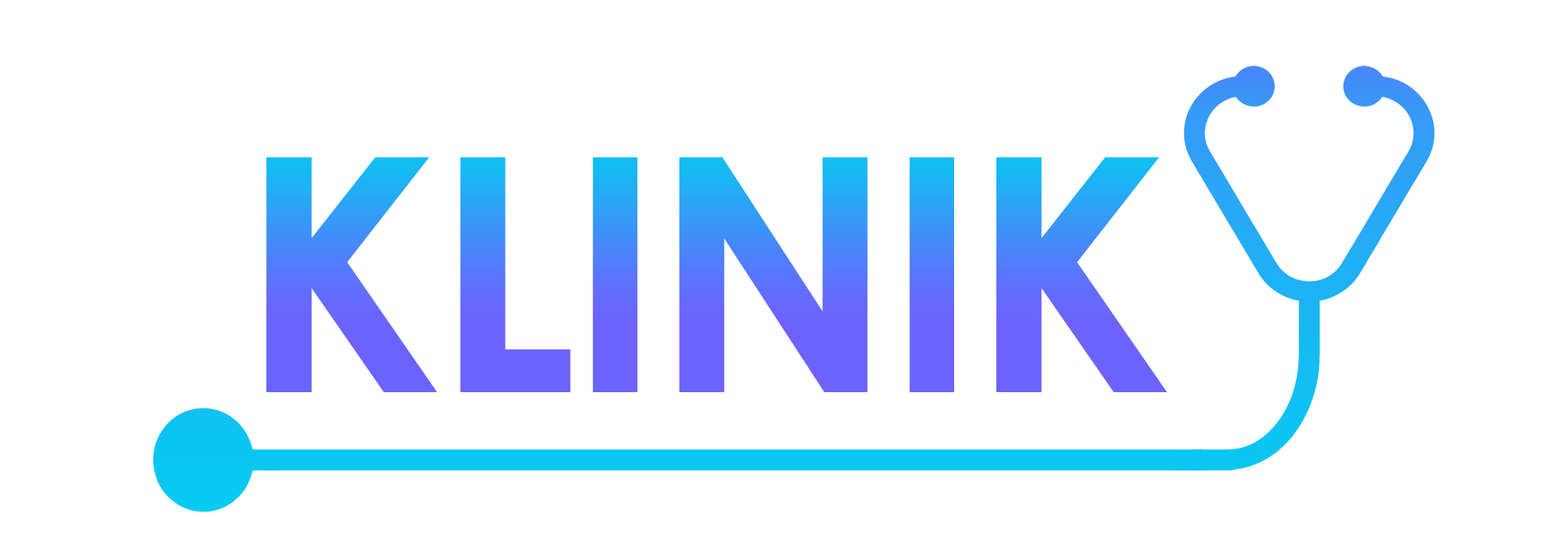
<style>
.page{position:relative;width:1568px;height:549px;background:#ffffff}
.page>*{position:absolute;margin:0}
.t1{font:326.7px "CenturyGothic-Bold";letter-spacing:-0.025em}
</style>
<div class="page">
<p class="t1" style="left:266px;top:157px;width:901px;height:235px">KLINIK</p>
</div>
